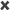
<style>
.page{position:relative;width:10px;height:10px;background:#ffffff}
.page>*{position:absolute;margin:0}
.t1{font:12.5px "LithosPro-Black";letter-spacing:-0.02em;color:#3f3f3f}
</style>
<div class="page">
<p class="t1" style="left:0px;top:0px;width:10px;height:11px">X</p>
</div>
